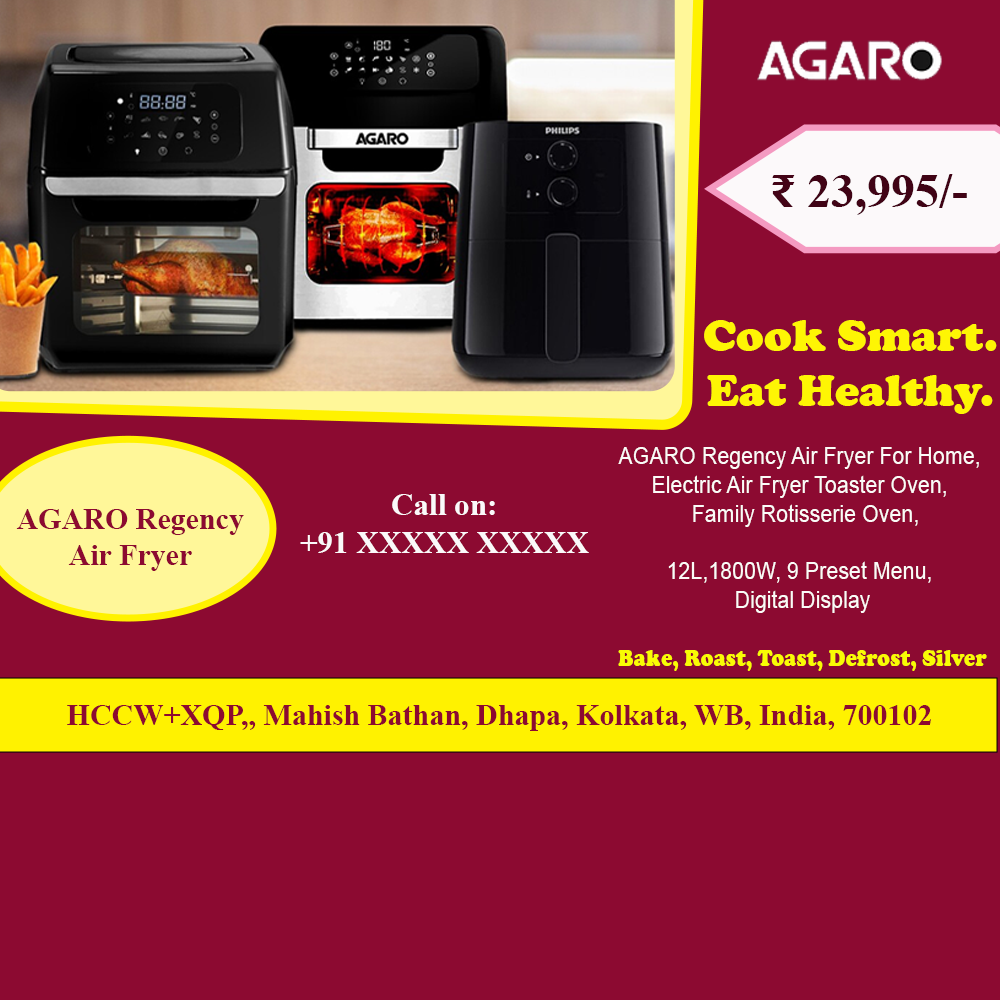
<style>
.page{position:relative;width:1000px;height:1000px;background:#8c0a31}
.page>*{position:absolute;margin:0}
.t1{font:48px "TimesNewRomanPS-BoldMT";color:#400315}
.t2{font:48px "TimesNewRomanPS-BoldMT";color:#440417}
.t3{font:46px "CooperBlack";color:#fef504}
.t4{font:24px "ArialMT";color:#fbfbf8;scale:0.89 1}
.t5{font:24px "CooperBlack";color:#f9fc04;scale:0.89 1}
.t6{font:31.7px "TimesNewRomanPS-BoldMT";color:#fbf9fa}
.t7{font:30px "TimesNewRomanPS-BoldMT";color:#8c0a31}
</style>
<div class="page">
<p class="t1" style="left:772px;top:174px;width:195px;height:41px"><span class="t2">₹ </span>23,995/-</p>
<p class="t3" style="left:704px;top:320px;width:293px;height:94px;text-align:center">Cook Smart.<br>Eat Healthy.</p>
<p class="t4" style="left:618px;top:447px;width:369px;height:224px;text-align:center">AGARO Regency Air Fryer For Home, <br>Electric Air Fryer Toaster Oven, <br> Family Rotisserie Oven,<br><br>12L,1800W, 9 Preset Menu, <br>Digital Display<br><br><span class="t5">Bake, Roast, Toast, Defrost, Silver</span></p>
<p class="t6" style="left:300px;top:494px;width:289px;height:59px;text-align:center">Call on: <br>+91 XXXXX XXXXX</p>
<p class="t7" style="left:16px;top:509px;width:228px;height:62px;text-align:center">AGARO Regency Air Fryer</p>
<p class="t7" style="left:67px;top:705px;width:864px;height:26px">HCCW+XQP,, Mahish Bathan, Dhapa, Kolkata, WB, India, 700102</p>
</div>
